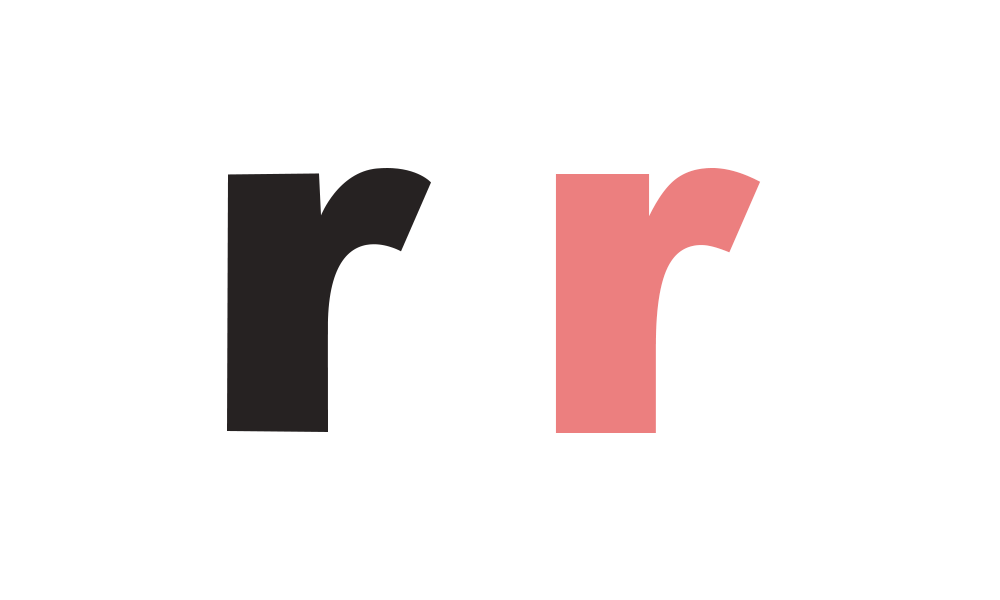
<style>
.page{position:relative;width:1000px;height:600px;background:#ffffff}
.page>*{position:absolute;margin:0}
.t1{font:500px "Arial-Black";color:#ec7f7f}
</style>
<div class="page">
<p class="t1" style="left:555px;top:168px;width:206px;height:265px">r</p>
</div>
